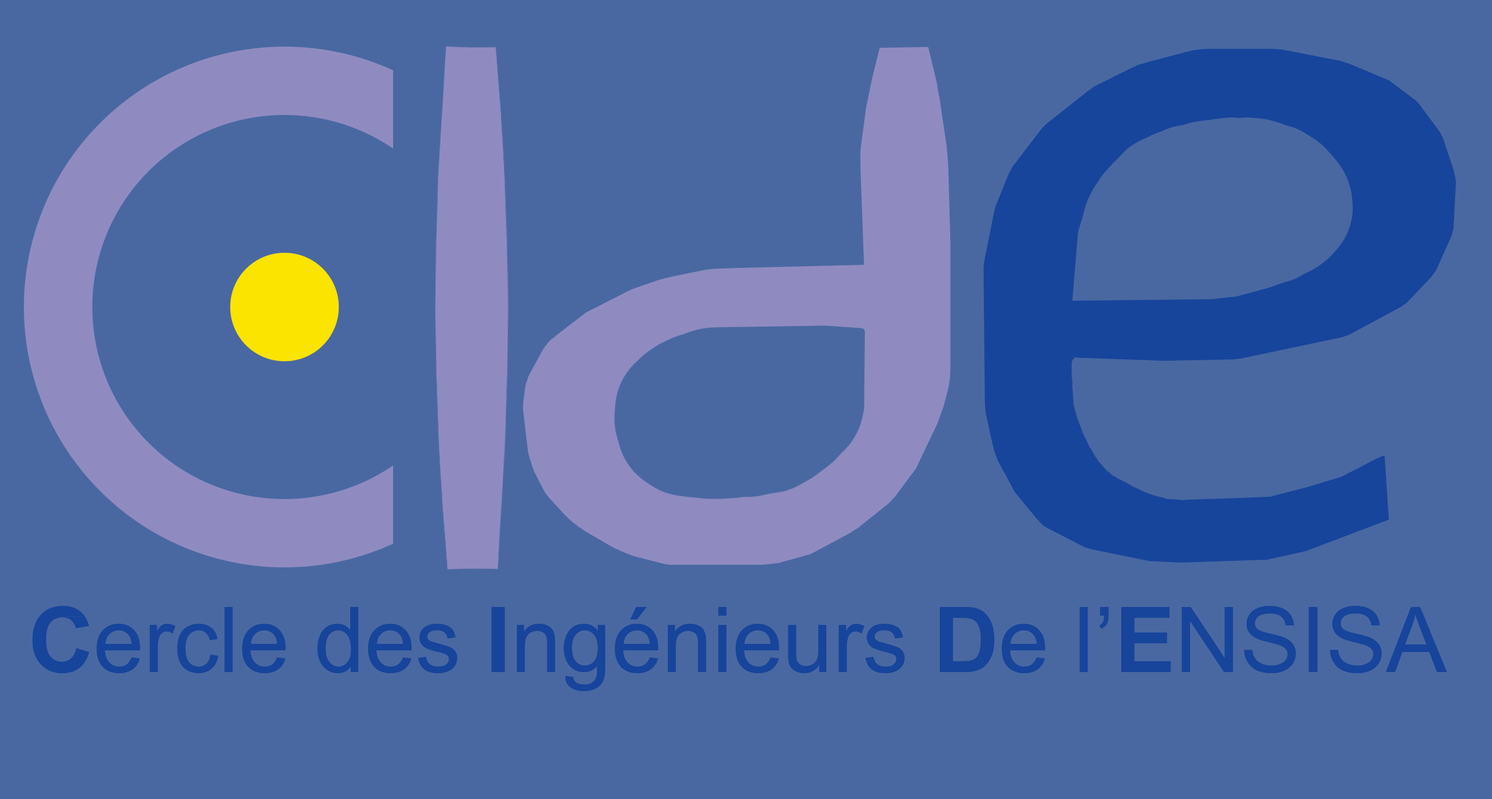
<style>
.page{position:relative;width:1492px;height:799px;background:#4968a2}
.page>*{position:absolute;margin:0}
.t1{font:90.5px "ArialMT";color:#17459b}
.t2{font:90.5px "Arial-BoldMT";color:#17459b}
</style>
<div class="page">
<p class="t1" style="left:32px;top:606px;width:1414px;height:85px"><span class="t2">C</span>ercle des <span class="t2">I</span>ngénieurs <span class="t2">D</span>e l’<span class="t2">E</span>NSISA</p>
</div>
